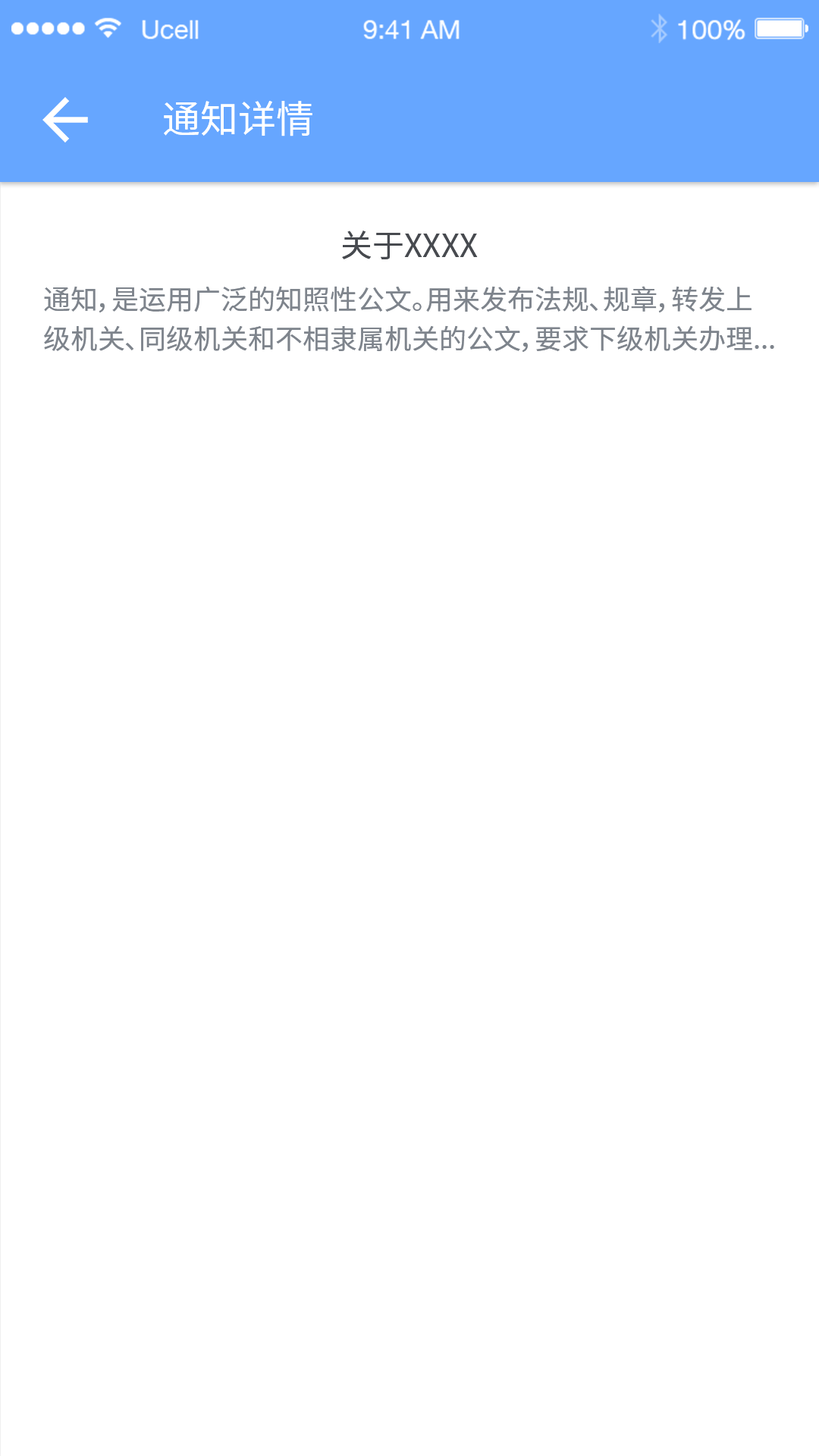
<style>
.page{position:relative;width:819px;height:1456px;background:#ffffff}
.page>*{position:absolute;margin:0}
.t1{font:37.9px "NotoSansHans-Regular";color:#ffffff}
.t2{font:31.8px "NotoSansHans-Regular";color:#474a4f}
.t3{font:27.3px/39.4px "NotoSansHans-Regular";color:#7e848c}
</style>
<div class="page">
<p class="t1" style="left:164px;top:101px;width:148px;height:35px">通知详情</p>
<p class="t2" style="left:342px;top:231px;width:136px;height:28px">关于XXXX</p>
<p class="t3" style="left:44px;top:286px;width:730px;height:67px">通知，是运用广泛的知照性公文。用来发布法规、规章，转发上级机关、同级机关和不相隶属机关的公文，要求下级机关办理...</p>
</div>
